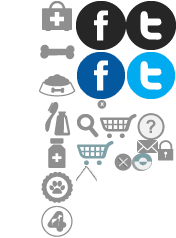
<style>
.page{position:relative;width:176px;height:238px;background:#ffffff}
.page>*{position:absolute;margin:0}
.t1{font:6px "OpenSans-Extrabold";letter-spacing:-0.02em;color:#f1f1f1}
.t2{font:18px "Arial-BoldMT";color:#8f8f8f}
</style>
<div class="page">
<p class="t1" style="left:100px;top:102px;width:4px;height:4px">x</p>
<p class="t2" style="left:146px;top:119px;width:10px;height:14px">?</p>
</div>
